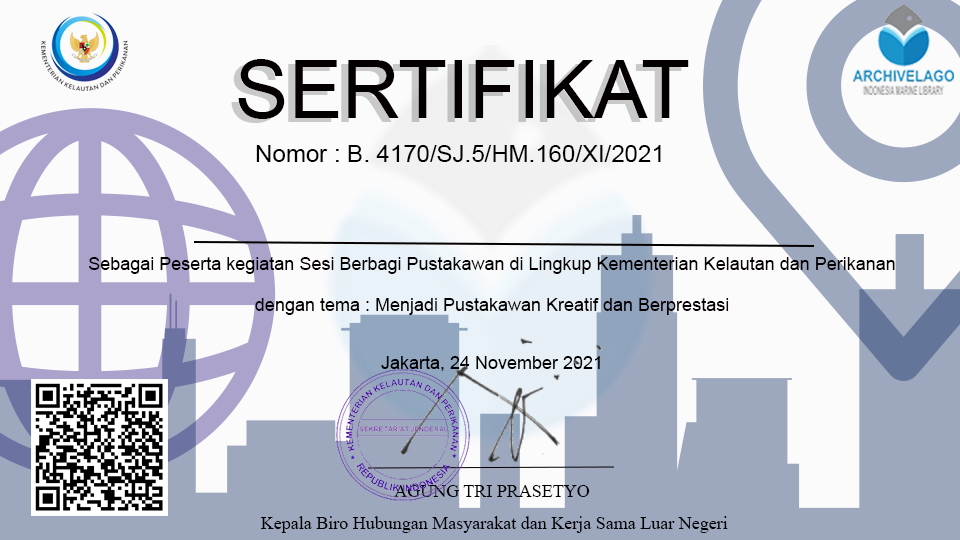
<style>
.page{position:relative;width:960px;height:540px;background:#fcfbfc}
.page>*{position:absolute;margin:0}
.t1{font:80px "ArialMT";color:#040000}
.t2{font:24px "ArialMT";color:#030000}
.t3{font:18px "ArialMT";color:#040000}
.t4{font:18px "ArialMT";color:#050000}
.t5{font:18px "ArialMT";color:#010000}
.t6{font:18px "TimesNewRomanPSMT";color:#020000}
.t7{font:18px "TimesNewRomanPSMT";color:#010000}
</style>
<div class="page">
<p class="t1" style="left:238px;top:59px;width:451px;height:60px">SERTIFIKAT</p>
<p class="t2" style="left:256px;top:145px;width:405px;height:17px">Nomor : B. 4170/SJ.5/HM.160/XI/2021</p>
<p class="t3" style="left:89px;top:257px;width:806px;height:17px">Sebagai Peserta kegiatan Sesi Berbagi Pustakawan di Lingkup Kementerian Kelautan dan Perikanan</p>
<p class="t4" style="left:255px;top:298px;width:474px;height:17px">dengan tema : Menjadi Pustakawan Kreatif dan Berprestasi</p>
<p class="t5" style="left:381px;top:356px;width:219px;height:15px">Jakarta, 24 November 2021</p>
<p class="t6" style="left:394px;top:485px;width:196px;height:12px">AGUNG TRI PRASETYO</p>
<p class="t7" style="left:261px;top:516px;width:467px;height:17px">Kepala Biro Hubungan Masyarakat dan Kerja Sama Luar Negeri</p>
</div>
